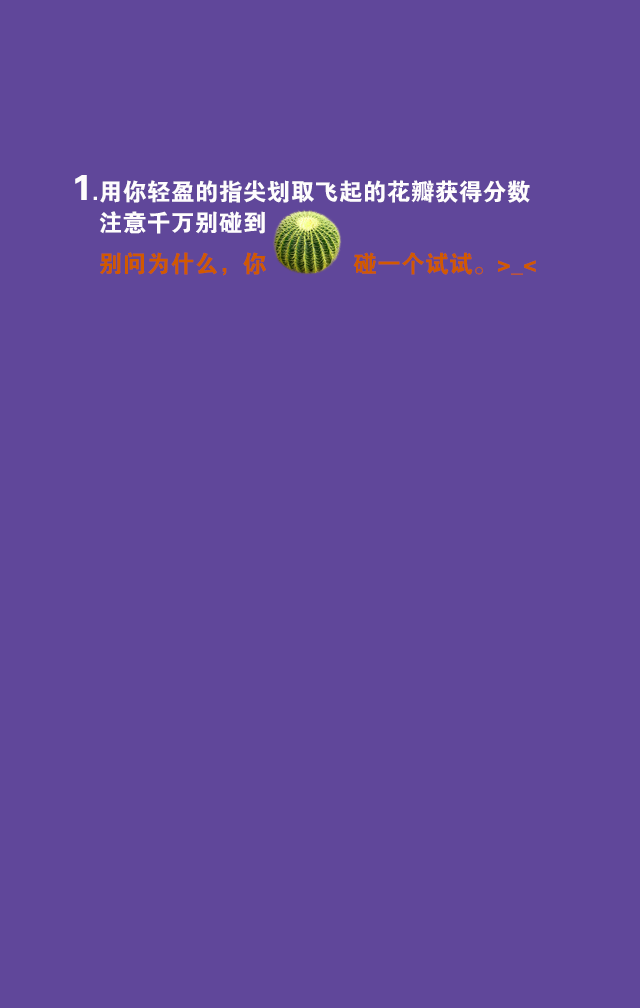
<style>
.page{position:relative;width:640px;height:1008px;background:#60479a}
.page>*{position:absolute;margin:0}
.t1{font:24px/48px "FZDHTJW--GB1-0";color:#fefcfd}
.t2{font:36px/48px "FZDHTJW--GB1-0";color:#fefcfd}
.t3{font:24px/48px "FZDHTJW--GB1-0";color:#d15900}
</style>
<div class="page">
<p class="t1" style="left:75px;top:175px;width:461px;height:101px"><span class="t2">1</span>.用你轻盈的指尖划取飞起的花瓣获得分数<br>    注意千万别碰到<br>    <span class="t3">别问为什么，你             碰一个试试。&gt;_&lt;</span></p>
</div>
